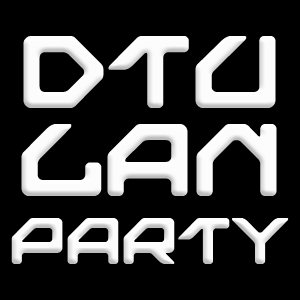
<style>
.page{position:relative;width:300px;height:300px;background:#000000}
.page>*{position:absolute;margin:0}
.t1{font:106.9px/87.5px "NextGames";letter-spacing:-0.025em;color:#fcfcfc}
.t2{font:68.1px/68.1px "NextGames";letter-spacing:-0.025em;color:#fcfcfc}
</style>
<div class="page">
<p class="t1" style="left:11px;top:36px;width:278px;height:228px;text-align:center">DTU<br>LAN<br><span class="t2">PARTY</span></p>
</div>
